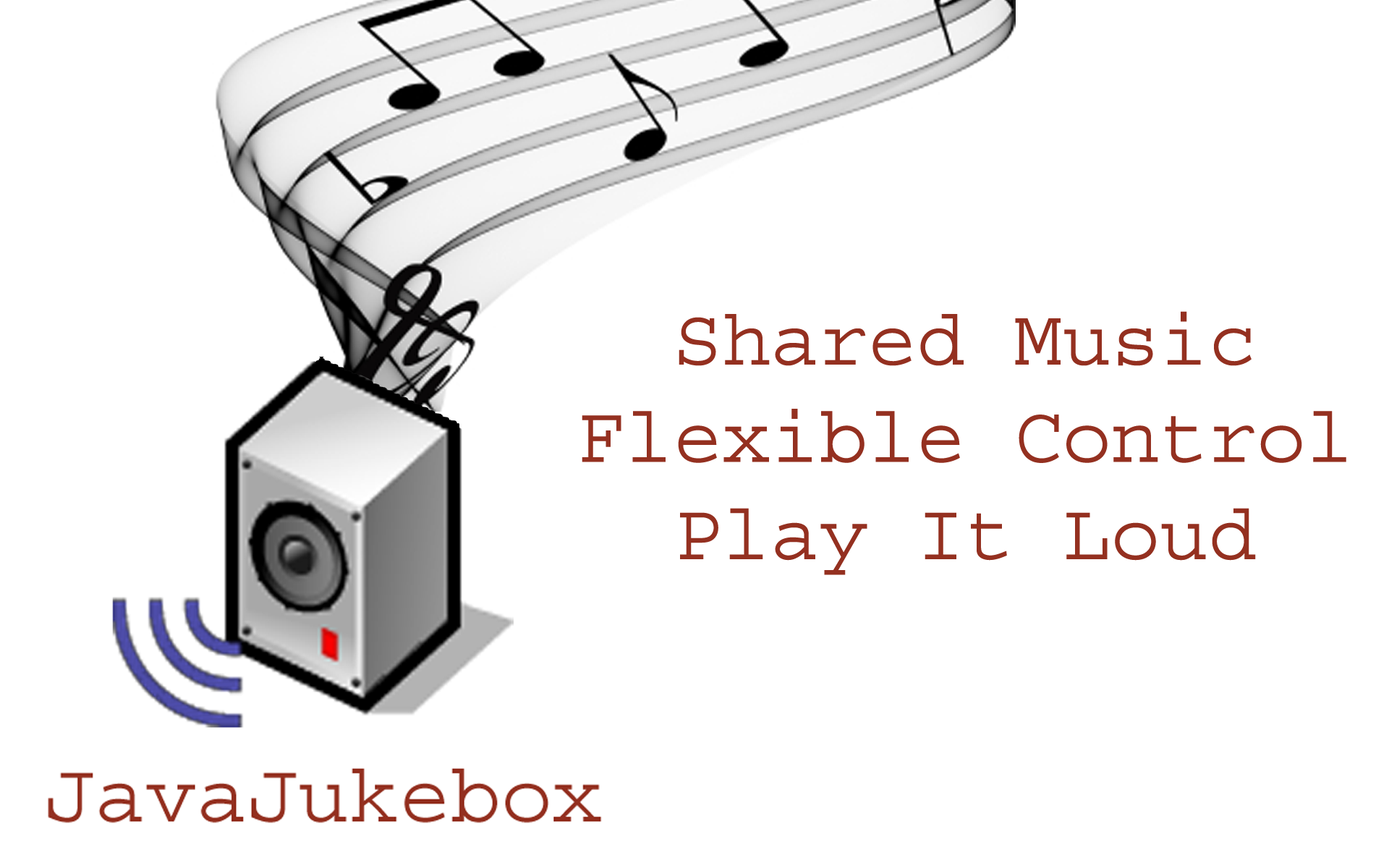
<style>
.page{position:relative;width:1389px;height:858px;background:#ffffff}
.page>*{position:absolute;margin:0}
.t1{font:81px "Courier";color:#943020}
</style>
<div class="page">
<p class="t1" style="left:582px;top:311px;width:765px;height:264px;text-align:center">Shared Music<br>Flexible Control<br>Play It Loud</p>
</div>
